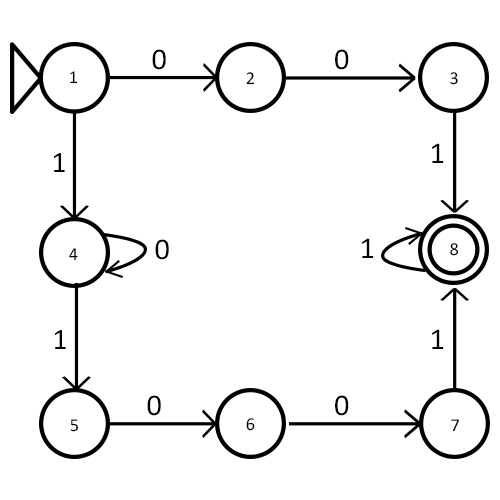
<style>
.page{position:relative;width:500px;height:500px;background:#ffffff}
.page>*{position:absolute;margin:0}
.t1{font:30.2px "Calibri";color:#000000}
.t2{font:18.2px "Calibri";color:#000000}
.t3{font:29.6px "Calibri";color:#000000}
</style>
<div class="page">
<p class="t1" style="left:152px;top:49px;width:14px;height:21px">0</p>
<p class="t1" style="left:335px;top:49px;width:14px;height:21px">0</p>
<p class="t2" style="left:70px;top:71px;width:8px;height:13px">1</p>
<p class="t2" style="left:246px;top:72px;width:9px;height:13px">2</p>
<p class="t2" style="left:450px;top:72px;width:8px;height:13px">3</p>
<p class="t1" style="left:432px;top:143px;width:12px;height:20px">1</p>
<p class="t3" style="left:54px;top:153px;width:11px;height:19px">1</p>
<p class="t1" style="left:155px;top:239px;width:14px;height:21px">0</p>
<p class="t1" style="left:362px;top:238px;width:12px;height:20px">1</p>
<p class="t2" style="left:450px;top:243px;width:9px;height:13px">8</p>
<p class="t2" style="left:69px;top:248px;width:9px;height:12px">4</p>
<p class="t1" style="left:432px;top:329px;width:12px;height:20px">1</p>
<p class="t3" style="left:55px;top:330px;width:11px;height:19px">1</p>
<p class="t1" style="left:147px;top:395px;width:14px;height:21px">0</p>
<p class="t1" style="left:335px;top:395px;width:14px;height:21px">0</p>
<p class="t2" style="left:70px;top:419px;width:9px;height:13px">5</p>
<p class="t2" style="left:246px;top:418px;width:9px;height:13px">6</p>
<p class="t2" style="left:451px;top:419px;width:8px;height:13px">7</p>
</div>
